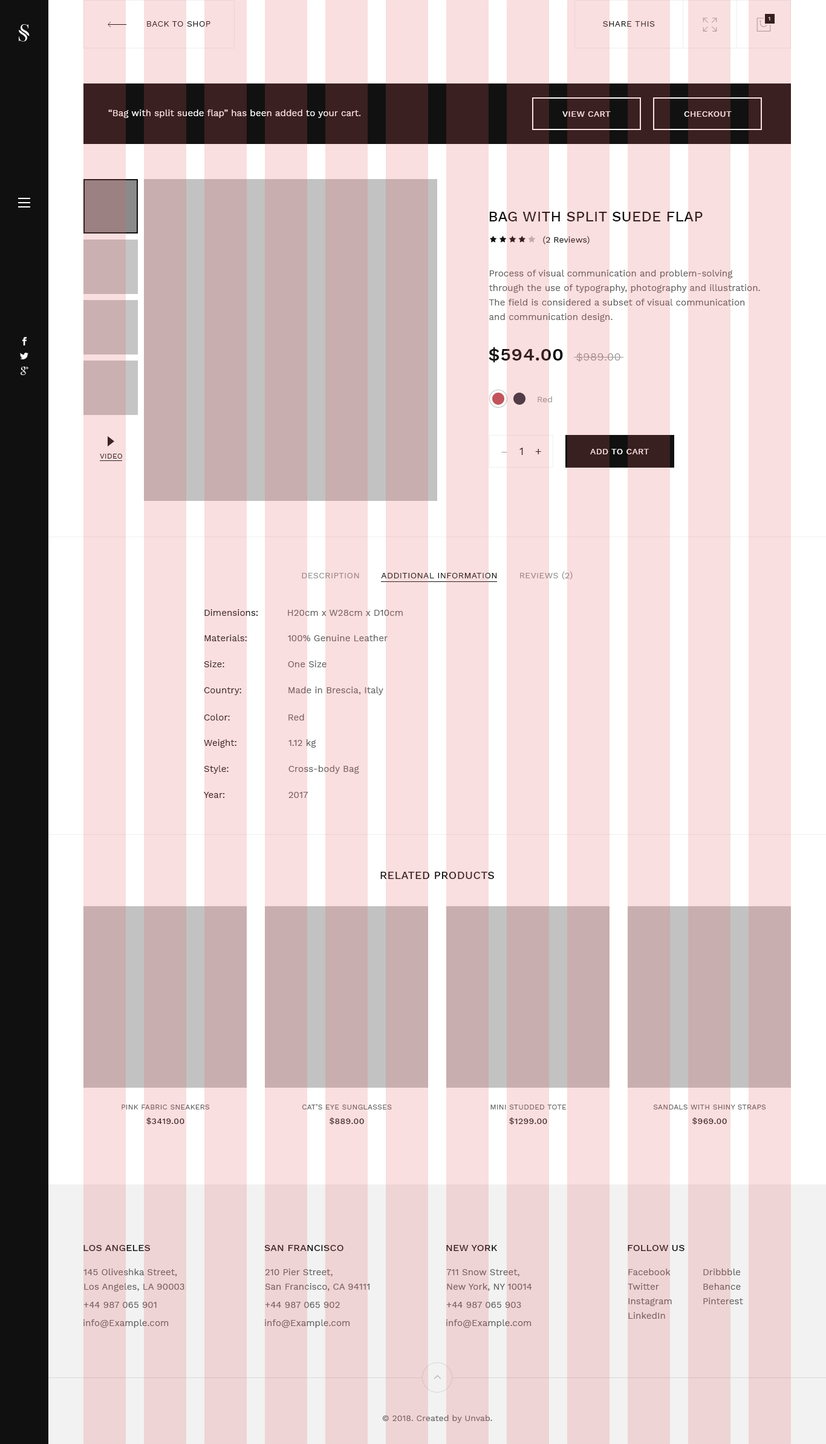
<style>
.page{position:relative;width:826px;height:1444px;background:#f9dfdf}
.page>*{position:absolute;margin:0}
.t1{font:5.4px "WorkSans-Regular";letter-spacing:0.025em;text-transform:uppercase}
.t2{font:8.5px "WorkSans-Regular";letter-spacing:0.025em;text-transform:uppercase}
.t3{font:9.1px "WorkSans-Regular";letter-spacing:0.005em}
.t4{font:8.5px "WorkSans-Medium";letter-spacing:0.025em;color:#f9dfdf;text-transform:uppercase}
.t5{font:14.5px "WorkSans-Medium";letter-spacing:0.01em;text-transform:uppercase}
.t6{font:8.5px "WorkSans-Regular";letter-spacing:0.005em}
.t7{font:9.1px/14.5px "WorkSans-Regular";letter-spacing:0.005em}
.t8{font:18.1px "WorkSans-SemiBold";letter-spacing:0.025em;text-transform:uppercase}
.t9{font:10.9px "WorkSans-Regular";letter-spacing:0.025em;text-transform:uppercase}
.t10{font:8.5px "WorkSans-Regular";letter-spacing:0.005em;color:#9c9c9c}
.t11{font:10.9px "WorkSans-Regular";letter-spacing:0.005em;color:#392020}
.t12{font:8.5px "WorkSans-Medium";letter-spacing:0.025em;text-transform:uppercase}
.t13{font:7.3px "WorkSans-Regular";letter-spacing:0.025em;color:#392020;text-transform:uppercase}
.t14{font:10.9px "WorkSans-Regular";letter-spacing:0.005em;color:#9c9c9c}
.t15{font:8.5px "WorkSans-Regular";letter-spacing:0.025em;color:#101010;text-transform:uppercase}
.t16{font:8.5px "WorkSans-Regular";letter-spacing:0.025em;color:#8e8e8e;text-transform:uppercase}
.t17{font:9.1px "WorkSans-Regular";letter-spacing:0.005em;color:#3d2323}
.t18{font:9.1px "WorkSans-Regular";letter-spacing:0.005em;color:#795f5f}
.t19{font:10.9px "WorkSans-Medium";letter-spacing:0.025em;color:#392020;text-transform:uppercase}
.t20{font:7.3px/18.1px "WorkSans-Regular";letter-spacing:0.025em}
.t21{font:8.5px/14.5px "WorkSans-Medium";letter-spacing:0.025em}
.t22{font:9.7px "WorkSans-Medium";letter-spacing:0.01em;text-transform:uppercase}
.t23{font:9.7px "WorkSans-Medium";letter-spacing:0.01em;color:#381e1e;text-transform:uppercase}
.t24{font:9.1px/14.5px "WorkSans-Regular";letter-spacing:0.005em;color:#795f5f}
.t25{font:8.5px "WorkSans-Regular";letter-spacing:0.005em;color:#795f5f}
</style>
<div class="page">
<p class="t1" style="left:768px;top:17px;width:2px;height:4px">1</p>
<p class="t2" style="left:147px;top:21px;width:63px;height:6px">back to shop</p>
<p class="t2" style="left:603px;top:21px;width:52px;height:6px">share this</p>
<p class="t3" style="left:108px;top:109px;width:253px;height:9px">“Bag with split suede flap” has been added to your cart.</p>
<p class="t4" style="left:562px;top:111px;width:49px;height:6px">view cart</p>
<p class="t4" style="left:684px;top:111px;width:48px;height:6px">checkout</p>
<p class="t5" style="left:489px;top:212px;width:214px;height:9px">Bag with split suede flap</p>
<p class="t6" style="left:543px;top:236px;width:47px;height:8px">(2 Reviews)</p>
<p class="t7" style="left:489px;top:270px;width:271px;height:52px">Process of visual communication and problem-solving <br>through the use of typography, photography and illustration. <br>The field is considered a subset of visual communication <br>and communication design.</p>
<p class="t8" style="left:489px;top:347px;width:131px;height:15px">$594.00  <span class="t9">$989.00</span></p>
<p class="t10" style="left:538px;top:396px;width:14px;height:6px">Red</p>
<p class="t11" style="left:519px;top:448px;width:4px;height:7px">1</p>
<p class="t11" style="left:535px;top:449px;width:6px;height:5px">+</p>
<p class="t12" style="left:590px;top:449px;width:59px;height:5px">add to cart</p>
<p class="t13" style="left:100px;top:454px;width:22px;height:4px">video</p>
<p class="t14" style="left:501px;top:452px;width:6px;height:0px">−</p>
<p class="t15" style="left:302px;top:571px;width:271px;height:8px"><span class="t16">Description</span>       Additional Information<span class="t16">       Reviews (2)</span></p>
<p class="t17" style="left:204px;top:609px;width:54px;height:7px">Dimensions:</p>
<p class="t3" style="left:288px;top:610px;width:115px;height:6px">H20cm x W28cm x D10cm</p>
<p class="t17" style="left:204px;top:634px;width:43px;height:7px">Materials:</p>
<p class="t3" style="left:288px;top:634px;width:100px;height:7px">100% Genuine Leather</p>
<p class="t17" style="left:204px;top:660px;width:20px;height:7px">Size:</p>
<p class="t3" style="left:288px;top:660px;width:39px;height:7px">One Size</p>
<p class="t17" style="left:204px;top:687px;width:37px;height:8px">Country:</p>
<p class="t3" style="left:288px;top:686px;width:95px;height:9px">Made in Brescia, Italy</p>
<p class="t17" style="left:204px;top:714px;width:26px;height:6px">Color:</p>
<p class="t18" style="left:288px;top:714px;width:16px;height:6px">Red</p>
<p class="t17" style="left:204px;top:739px;width:32px;height:8px">Weight:</p>
<p class="t3" style="left:288px;top:739px;width:28px;height:8px">1.12 kg</p>
<p class="t17" style="left:204px;top:765px;width:25px;height:8px">Style:</p>
<p class="t18" style="left:288px;top:765px;width:71px;height:8px">Cross-body Bag</p>
<p class="t17" style="left:204px;top:792px;width:21px;height:6px">Year:</p>
<p class="t18" style="left:288px;top:792px;width:20px;height:6px">2017</p>
<p class="t19" style="left:380px;top:871px;width:114px;height:8px">related products</p>
<p class="t20" style="left:122px;top:1104px;width:88px;height:20px;text-align:center">PINK FABRIC SNEAKERS<br><span class="t21">$3419.00</span></p>
<p class="t20" style="left:302px;top:1104px;width:90px;height:20px;text-align:center">CAT’S EYE SUNGLASSES<br><span class="t21">$889.00</span></p>
<p class="t20" style="left:490px;top:1104px;width:77px;height:20px;text-align:center">MINI STUDDED TOTE<br><span class="t21">$1299.00</span></p>
<p class="t20" style="left:653px;top:1104px;width:113px;height:20px;text-align:center">SANDALS WITH SHINY STRAPS<br><span class="t21">$969.00</span></p>
<p class="t22" style="left:83px;top:1245px;width:67px;height:6px">los angeles</p>
<p class="t23" style="left:264px;top:1245px;width:79px;height:6px">San Francisco</p>
<p class="t23" style="left:446px;top:1245px;width:52px;height:6px">New York</p>
<p class="t23" style="left:628px;top:1245px;width:57px;height:6px">follow us</p>
<p class="t24" style="left:83px;top:1268px;width:101px;height:23px">145 Oliveshka Street, <br>Los Angeles, LA 90003</p>
<p class="t24" style="left:265px;top:1268px;width:104px;height:23px">210 Pier Street,<br>San Francisco, CA 94111</p>
<p class="t24" style="left:446px;top:1269px;width:86px;height:22px">711 Snow Street, <br>New York, NY 10014</p>
<p class="t24" style="left:628px;top:1268px;width:44px;height:50px">Facebook<br>Twitter<br>Instagram<br>LinkedIn</p>
<p class="t24" style="left:703px;top:1268px;width:40px;height:36px">Dribbble<br>Behance<br>Pinterest</p>
<p class="t18" style="left:83px;top:1301px;width:74px;height:6px">+44 987 065 901</p>
<p class="t18" style="left:265px;top:1301px;width:75px;height:6px">+44 987 065 902</p>
<p class="t18" style="left:446px;top:1301px;width:75px;height:6px">+44 987 065 903</p>
<p class="t18" style="left:83px;top:1319px;width:86px;height:8px">info@Example.com</p>
<p class="t18" style="left:265px;top:1319px;width:85px;height:8px">info@Example.com</p>
<p class="t18" style="left:446px;top:1319px;width:86px;height:8px">info@Example.com</p>
<p class="t25" style="left:382px;top:1414px;width:110px;height:8px">© 2018. Created by Unvab.</p>
</div>
